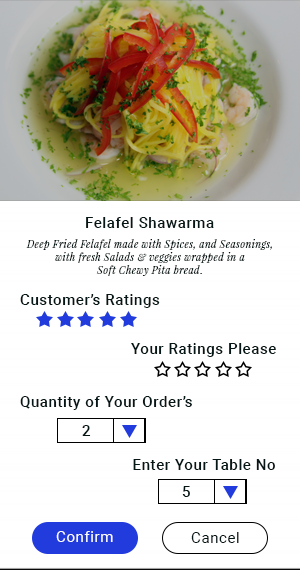
<style>
.page{position:relative;width:300px;height:570px;background:#ffffff}
.page>*{position:absolute;margin:0}
.t1{font:15px "Roboto-Medium";letter-spacing:0.04em;color:#061616}
.t2{font:10px/13px "PlayfairDisplay-Italic";letter-spacing:0.04em;color:#061616}
.t3{font:10px/13px "Roboto-Medium";letter-spacing:0.04em;color:#061616}
.t4{font:15px "Roboto-Regular";letter-spacing:0.04em;color:#ffffff}
.t5{font:15px "Roboto-Regular";letter-spacing:0.04em;color:#061616}
</style>
<div class="page">
<p class="t1" style="left:86px;top:217px;width:128px;height:11px">Felafel Shawarma</p>
<p class="t2" style="left:26px;top:239px;width:246px;height:37px;text-align:center">Deep Fried Felafel made with Spices, and Seasonings, with fresh Salads &amp; veggies wrapped in a <br>Soft Chewy Pita bread<span class="t3">.</span></p>
<p class="t1" style="left:20px;top:294px;width:140px;height:14px">Customer’s Ratings</p>
<p class="t1" style="left:131px;top:343px;width:145px;height:14px">Your Ratings Please</p>
<p class="t1" style="left:20px;top:396px;width:172px;height:14px">Quantity of Your Order’s</p>
<p class="t1" style="left:82px;top:425px;width:9px;height:11px">2</p>
<p class="t1" style="left:133px;top:459px;width:142px;height:11px">Enter Your Table No</p>
<p class="t1" style="left:182px;top:486px;width:8px;height:11px">5</p>
<p class="t4" style="left:56px;top:531px;width:57px;height:11px">Confirm</p>
<p class="t5" style="left:191px;top:532px;width:48px;height:11px">Cancel</p>
</div>
